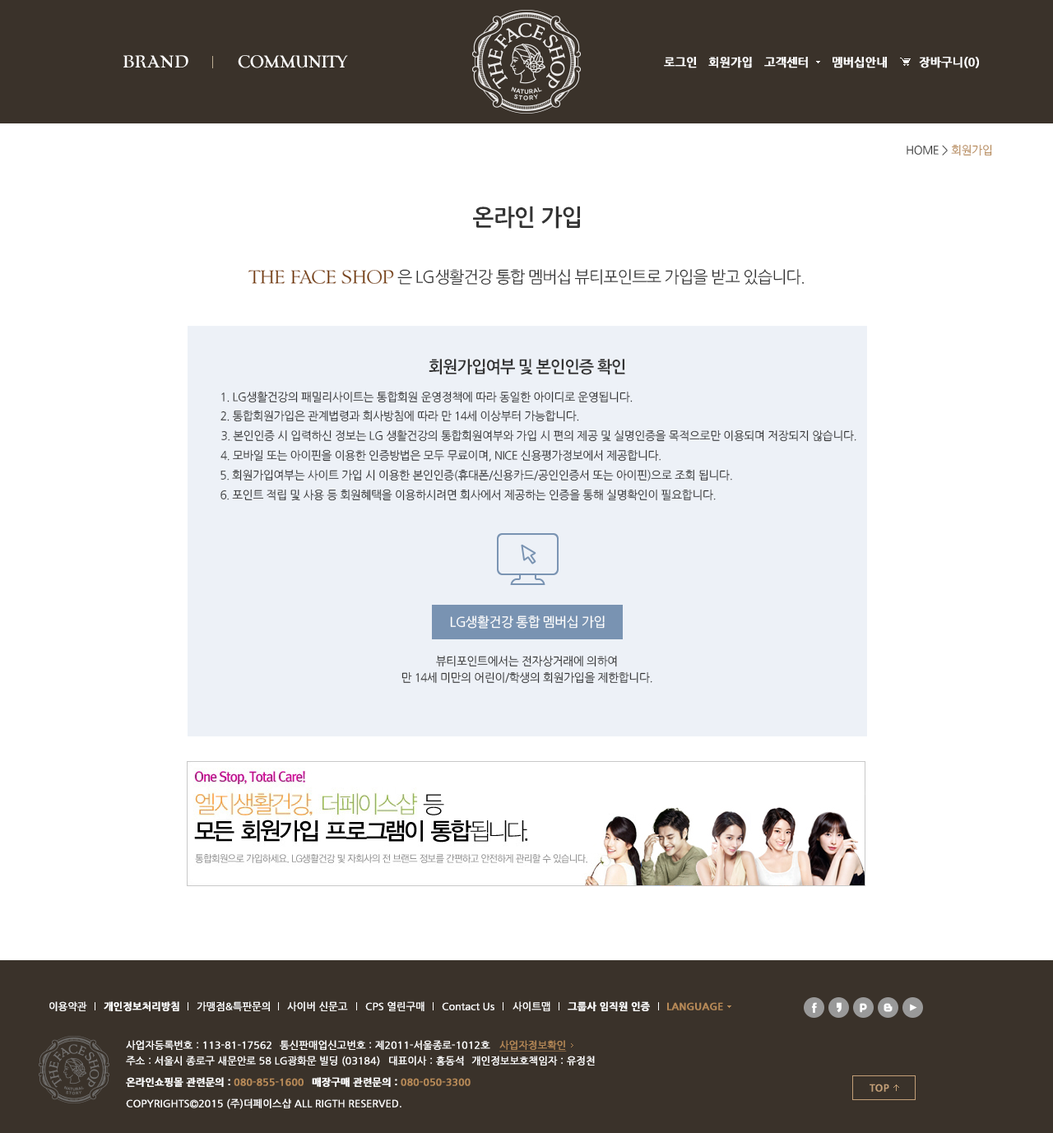
<style>
.page{position:relative;width:1053px;height:1133px;background:#ffffff}
.page>*{position:absolute;margin:0}
.t1{font:11.5px "NanumGothicBold";color:#ffffff;font-weight:bold}
.t2{font:11.5px "NanumGothic";letter-spacing:-0.03em;color:#333333}
.t3{font:11.5px "NanumGothic";letter-spacing:-0.03em;color:#b68957}
.t4{font:23px "NanumGothicBold";letter-spacing:-0.03em;color:#333333}
.t5{font:16.5px "NanumGothic";letter-spacing:-0.03em;color:#333333}
.t6{font:16.5px "NanumGothicBold";letter-spacing:-0.03em;color:#333333}
.t7{font:13.2px "NanumGothic";letter-spacing:-0.03em;color:#ffffff}
.t8{font:11.5px/16.5px "NanumGothic";letter-spacing:-0.03em;color:#333333}
.t9{font:9.9px "NanumGothic";color:#ffffff;font-weight:bold}
.t10{font:9.9px "NanumGothicBold";color:#ffffff;font-weight:bold}
.t11{font:9.9px "NanumGothicBold";color:#b68957;font-weight:bold}
.t12{font:9.9px "NanumGothic";color:#b68957;font-weight:bold;text-decoration:underline}
</style>
<div class="page">
<p class="t1" style="left:664px;top:57px;width:33px;height:11px">로그인</p>
<p class="t1" style="left:708px;top:57px;width:44px;height:11px">회원가입</p>
<p class="t1" style="left:764px;top:57px;width:44px;height:11px">고객센터</p>
<p class="t1" style="left:832px;top:57px;width:55px;height:11px">멤버십안내</p>
<p class="t1" style="left:919px;top:57px;width:60px;height:11px">장바구니(0)</p>
<p class="t2" style="left:906px;top:144px;width:86px;height:12px">HOME &gt; <span class="t3">회원가입</span></p>
<p class="t4" style="left:473px;top:206px;width:107px;height:23px">온라인 가입</p>
<p class="t5" style="left:397px;top:269px;width:407px;height:16px">은 LG생활건강 통합 멤버십 뷰티포인트로 가입을 받고 있습니다.</p>
<p class="t6" style="left:429px;top:359px;width:196px;height:16px">회원가입여부 및 본인인증 확인</p>
<p class="t2" style="left:221px;top:391px;width:412px;height:12px">1. LG생활건강의 패밀리사이트는 통합회원 운영정책에 따라 동일한 아이디로 운영됩니다.</p>
<p class="t2" style="left:220px;top:410px;width:359px;height:12px">2. 통합회원가입은 관계법령과 회사방침에 따라 만 14세 이상부터 가능합니다.</p>
<p class="t2" style="left:221px;top:429px;width:635px;height:13px">3. 본인인증 시 입력하신 정보는 LG 생활건강의 통합회원여부와 가입 시 편의 제공 및 실명인증을 목적으로만 이용되며 저장되지 않습니다.</p>
<p class="t2" style="left:220px;top:449px;width:440px;height:12px">4. 모바일 또는 아이핀을 이용한 인증방법은 모두 무료이며, NICE 신용평가정보에서 제공합니다.</p>
<p class="t2" style="left:220px;top:469px;width:512px;height:12px">5. 회원가입여부는 사이트 가입 시 이용한 본인인증(휴대폰/신용카드/공인인증서 또는 아이핀)으로 조회 됩니다.</p>
<p class="t2" style="left:220px;top:489px;width:496px;height:12px">6. 포인트 적립 및 사용 등 회원혜택을 이용하시려면 회사에서 제공하는 인증을 통해 실명확인이 필요합니다.</p>
<p class="t7" style="left:450px;top:615px;width:155px;height:13px">LG생활건강 통합 멤버십 가입</p>
<p class="t8" style="left:401px;top:655px;width:251px;height:29px;text-align:center">뷰티포인트에서는 전자상거래에 의하여<br>만 14세 미만의 어린이/학생의 회원가입을 제한합니다.</p>
<p class="t9" style="left:49px;top:1001px;width:38px;height:10px">이용약관</p>
<p class="t10" style="left:104px;top:1001px;width:75px;height:10px">개인정보처리방침</p>
<p class="t9" style="left:197px;top:1001px;width:73px;height:10px">가맹점&amp;특판문의</p>
<p class="t9" style="left:287px;top:1001px;width:61px;height:10px">사이버 신문고</p>
<p class="t9" style="left:365px;top:1001px;width:59px;height:10px">CPS 열린구매</p>
<p class="t9" style="left:442px;top:1002px;width:52px;height:8px">Contact Us</p>
<p class="t9" style="left:512px;top:1001px;width:38px;height:10px">사이트맵</p>
<p class="t10" style="left:568px;top:1001px;width:82px;height:10px">그룹사 임직원 인증</p>
<p class="t11" style="left:667px;top:1002px;width:56px;height:8px">LANGUAGE</p>
<p class="t9" style="left:126px;top:1040px;width:145px;height:10px">사업자등록번호 : 113-81-17562</p>
<p class="t9" style="left:280px;top:1040px;width:210px;height:10px">통신판매업신고번호 : 제2011-서울종로-1012호</p>
<p class="t12" style="left:499px;top:1040px;width:68px;height:11px">사업자정보확인</p>
<p class="t9" style="left:126px;top:1055px;width:254px;height:11px">주소 : 서울시 종로구 새문안로 58 LG광화문 빌딩 (03184)</p>
<p class="t9" style="left:389px;top:1055px;width:75px;height:10px">대표이사 : 홍동석</p>
<p class="t9" style="left:471px;top:1055px;width:124px;height:10px">개인정보보호책임자 : 유정천</p>
<p class="t10" style="left:126px;top:1077px;width:178px;height:10px">온라인쇼핑몰 관련문의 : <span class="t11">080-855-1600</span></p>
<p class="t11" style="left:312px;top:1077px;width:158px;height:10px"><span class="t10">매장구매 관련문의 : </span>080-050-3300</p>
<p class="t9" style="left:126px;top:1098px;width:275px;height:11px">COPYRIGHTS©2015 (주)더페이스샵 ALL RIGTH RESERVED.</p>
</div>
